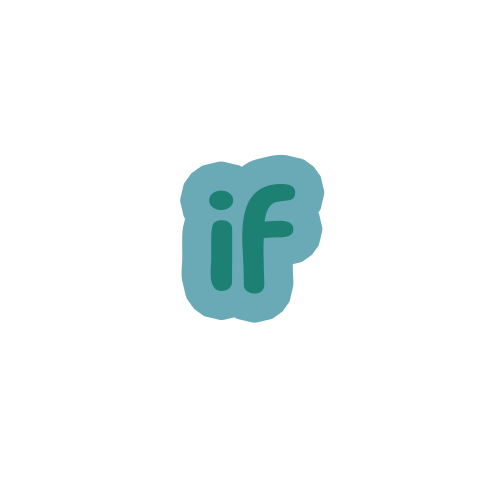
<style>
.page{position:relative;width:500px;height:500px;background:#ffffff}
.page>*{position:absolute;margin:0}
.t1{font:134.5px "Kronika";color:#1c8172;scale:1.05 1}
</style>
<div class="page">
<p class="t1" style="left:209px;top:183px;width:87px;height:111px">if</p>
</div>
